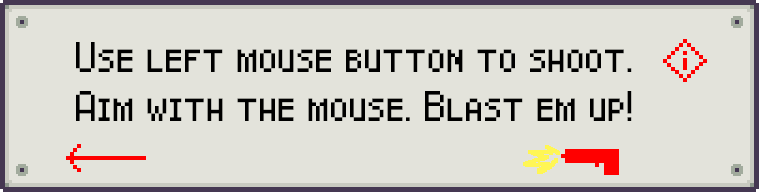
<style>
.page{position:relative;width:759px;height:192px;background:#e3e3db}
.page>*{position:absolute;margin:0}
.t1{font:30px/48.7px "Pixel-Caps";color:#000000}
</style>
<div class="page">
<p class="t1" style="left:76px;top:42px;width:556px;height:79px">Use left mouse button to shoot.<br>Aim with the mouse. Blast em up!</p>
</div>
